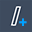
<style>
.page{position:relative;width:32px;height:32px;background:#3e4b5e}
.page>*{position:absolute;margin:0}
.t1{font:15.5px "SourceSansPro-Black";color:#00a2ff}
</style>
<div class="page">
<p class="t1" style="left:19px;top:18px;width:8px;height:8px">+</p>
</div>
